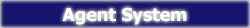
<style>
.page{position:relative;width:250px;height:28px;background:#15156d}
.page>*{position:absolute;margin:0}
.t1{font:18px "Tahoma-Bold";color:#fefefe}
</style>
<div class="page">
<p class="t1" style="left:62px;top:7px;width:125px;height:18px">Agent System</p>
</div>
